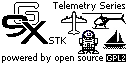
<style>
.page{position:relative;width:128px;height:64px;background:#ffffff}
.page>*{position:absolute;margin:0}
.t1{font:10px "Tahoma";color:#000000}
.t2{font:9px "Tahoma";color:#000000}
</style>
<div class="page">
<p class="t1" style="left:53px;top:1px;width:72px;height:10px">Telemetry Series</p>
<p class="t1" style="left:49px;top:37px;width:17px;height:7px">STK</p>
<p class="t2" style="left:2px;top:53px;width:101px;height:10px">powered by open source</p>
</div>
